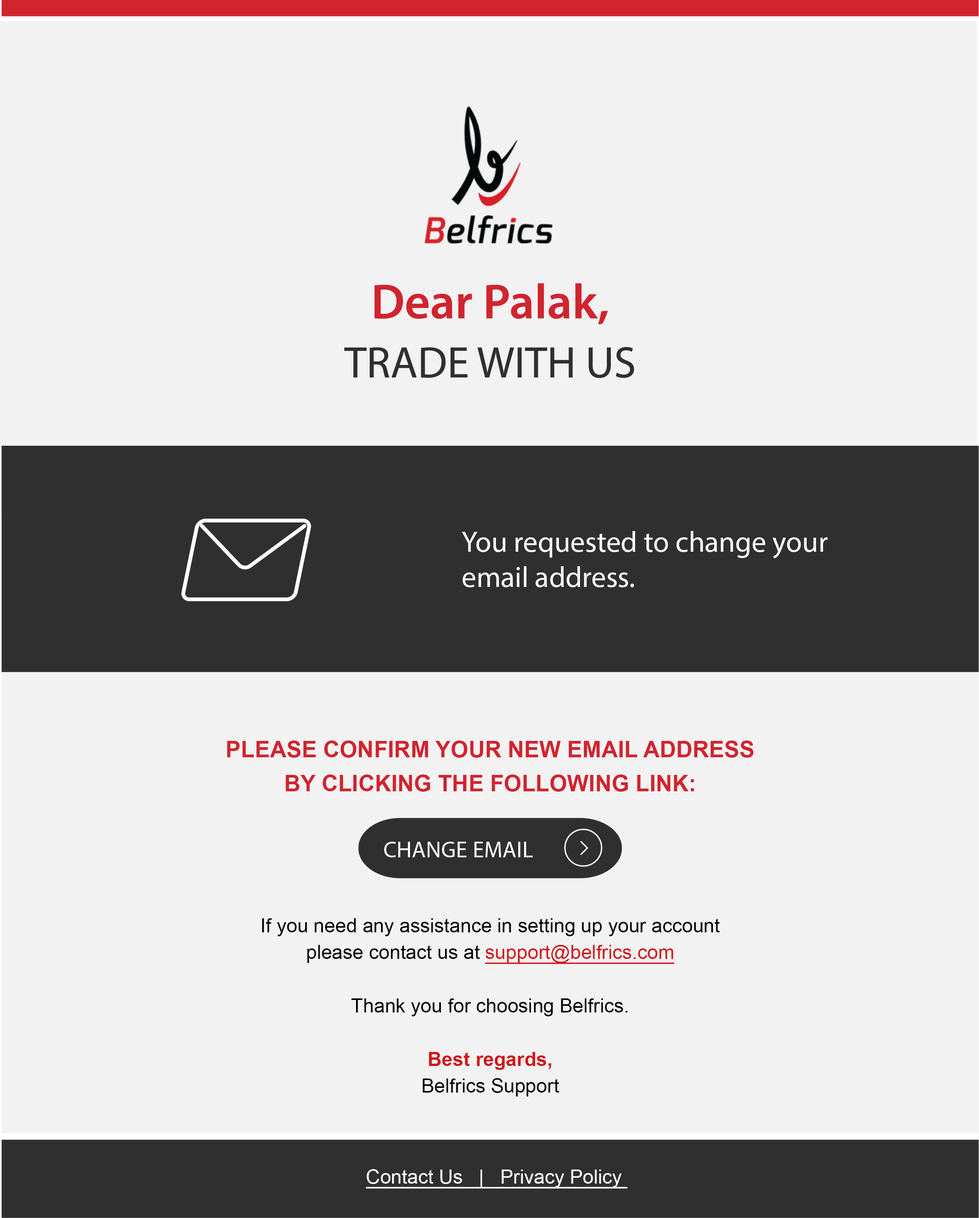
<style>
.page{position:relative;width:979px;height:1218px;background:#f2f2f2}
.page>*{position:absolute;margin:0}
.t1{font:29.3px "MyriadPro-Regular";color:#ffffff}
.t2{font:19.5px/26.7px "ArialMT";color:#000000}
.t3{font:22.8px/34.2px "Arial-BoldMT";color:#d1242f;text-transform:uppercase}
.t4{font:19.5px/26.7px "ArialMT";color:#d1171a;text-decoration:underline}
.t5{font:19.5px/26.7px "Arial-BoldMT";color:#d1171a}
.t6{font:22.8px "Graphik-Regular";letter-spacing:0.01em;color:#ffffff}
.t7{font:19.5px "ArialMT";color:#ffffff;text-decoration:underline}
</style>
<div class="page">
<p class="t1" style="left:462px;top:531px;width:366px;height:56px">You requested to change your email address.</p>
<p class="t2" style="left:227px;top:741px;width:526px;height:356px;text-align:justify"><span class="t3">Please confirm your new email address <br>by clicking the following link:<br><br><br><br><br></span>If you need any assistance in setting up your account <br>please contact us at <span class="t4">support@belfrics.com<br></span><br>Thank you for choosing Belfrics.<br><span class="t5"><br>Best regards,<br></span>Belfrics Support</p>
<p class="t6" style="left:384px;top:842px;width:149px;height:15px">CHANGE EMAIL</p>
<p class="t7" style="left:366px;top:1169px;width:262px;height:20px">Contact Us   |   Privacy Policy</p>
</div>
